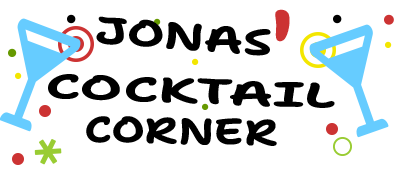
<style>
.page{position:relative;width:400px;height:169px;background:#ffffff}
.page>*{position:absolute;margin:0}
.t1{font:37.6px "ShantellSans-Bold";color:#000000;scale:1.37 1}
.t2{font:78.2px "ShantellSans-Bold";color:#cc3333}
.t3{font:35px "ShantellSans-Bold";color:#000000;scale:1.66 1}
.t4{font:36.8px "ShantellSans-Bold";color:#000000;scale:1.24 1}
</style>
<div class="page">
<p class="t1" style="left:96px;top:16px;width:175px;height:40px;rotate:4deg">JONAS</p>
<p class="t2" style="left:275px;top:9px;width:15px;height:33px;rotate:-14deg">‚</p>
<p class="t3" style="left:48px;top:74px;width:287px;height:34px;rotate:2deg">COCKTAIL</p>
<p class="t4" style="left:86px;top:116px;width:191px;height:30px;rotate:1deg">CORNER</p>
</div>
